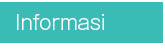
<style>
.page{position:relative;width:165px;height:50px;background:#3abbb6}
.page>*{position:absolute;margin:0}
.t1{font:20px "GothicMB101Pro-Light";color:#fbfbf9}
</style>
<div class="page">
<p class="t1" style="left:17px;top:14px;width:87px;height:16px">Informasi</p>
</div>
